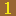
<style>
.page{position:relative;width:16px;height:16px;background:#996633}
.page>*{position:absolute;margin:0}
.t1{font:18px "Sylfaen";color:#f5e814}
</style>
<div class="page">
<p class="t1" style="left:5px;top:2px;width:6px;height:12px">1</p>
</div>
